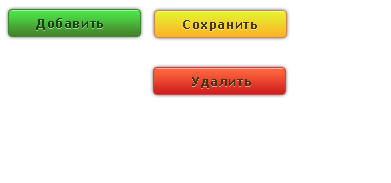
<style>
.page{position:relative;width:391px;height:183px;background:#ffffff}
.page>*{position:absolute;margin:0}
.t1{font:12px "Verdana-Bold";letter-spacing:0.05em;color:#184313}
.t2{font:12px "Verdana-Bold";letter-spacing:0.05em;color:#433713}
</style>
<div class="page">
<p class="t1" style="left:36px;top:18px;width:67px;height:12px">Добавить</p>
<p class="t2" style="left:183px;top:20px;width:74px;height:11px">Сохранить</p>
<p class="t2" style="left:192px;top:77px;width:59px;height:11px">Удалить</p>
</div>
